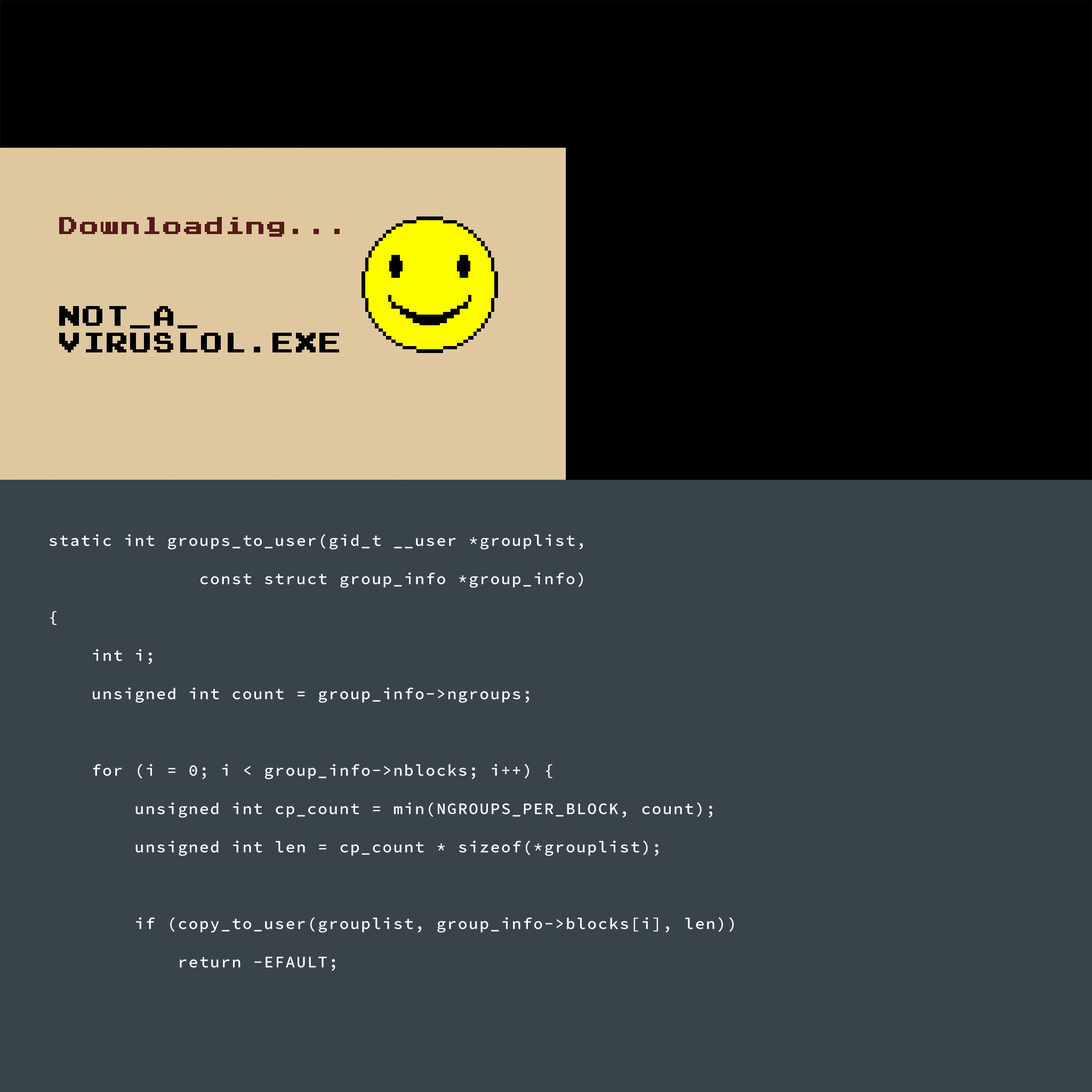
<style>
.page{position:relative;width:1092px;height:1092px;background:#38444a}
.page>*{position:absolute;margin:0}
.t1{font:16px "SourceCodePro-Medium";letter-spacing:0.075em;color:#ffffff}
</style>
<div class="page">
<p class="t1" style="left:49px;top:534px;width:685px;height:437px">static int groups_to_user(gid_t __user *grouplist,<br><br>              const struct group_info *group_info)<br><br>{<br><br>    int i;<br><br>    unsigned int count = group_info-&gt;ngroups;<br><br><br><br>    for (i = 0; i &lt; group_info-&gt;nblocks; i++) {<br><br>        unsigned int cp_count = min(NGROUPS_PER_BLOCK, count);<br><br>        unsigned int len = cp_count * sizeof(*grouplist);<br><br><br><br>        if (copy_to_user(grouplist, group_info-&gt;blocks[i], len))<br><br>            return -EFAULT;<br><br><br><br>        grouplist += NGROUPS_PER_BLOCK;<br><br>        count -= cp_count;<br><br>    }<br><br>    return 0;<br><br>}<br><br><br><br>/* fill a group_info from a user-space array - it must be allocated already */<br><br>static int groups_from_user(struct group_info *group_info,</p>
</div>
